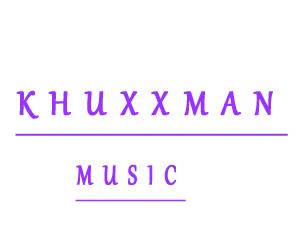
<style>
.page{position:relative;width:300px;height:250px;background:#ffffff}
.page>*{position:absolute;margin:0}
.t1{font:54.6px "Gabriola";letter-spacing:0.3em;color:#9933ff;font-variant:small-caps;font-weight:bold;text-decoration:underline;scale:0.79 1}
.t2{font:45px "Gabriola";letter-spacing:0.3em;color:#9933ff;font-variant:small-caps;font-weight:bold;text-decoration:underline;scale:0.67 1}
</style>
<div class="page">
<p class="t1" style="left:15px;top:90px;width:273px;height:46px">khuxxman</p>
<p class="t2" style="left:75px;top:164px;width:111px;height:38px">music</p>
</div>
